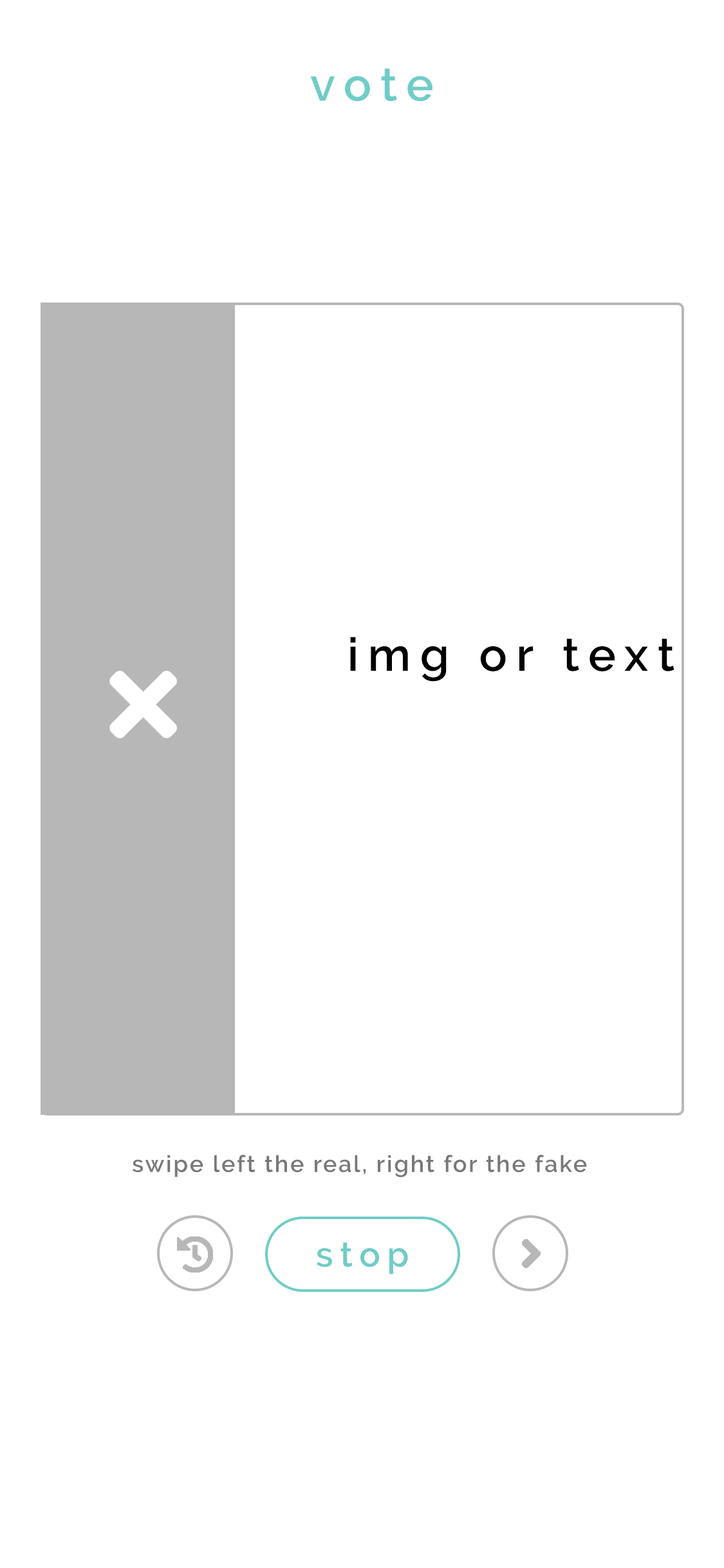
<style>
.page{position:relative;width:724px;height:1568px;background:#ffffff}
.page>*{position:absolute;margin:0}
.t1{font:46.3px "Raleway-SemiBold";letter-spacing:0.2em;color:#70ccc7}
.t2{font:46.3px "Raleway-SemiBold";letter-spacing:0.2em;color:#000000}
.t3{font:23.2px "Raleway-SemiBold";letter-spacing:0.075em;color:#797878}
.t4{font:34.8px "Raleway-SemiBold";letter-spacing:0.2em;color:#70ccc7}
</style>
<div class="page">
<p class="t1" style="left:310px;top:68px;width:123px;height:34px">vote</p>
<p class="t2" style="left:350px;top:637px;width:325px;height:45px">img or text</p>
<p class="t3" style="left:133px;top:1155px;width:454px;height:22px">swipe left the real, right for the fake</p>
<p class="t4" style="left:317px;top:1242px;width:91px;height:32px">stop</p>
</div>
